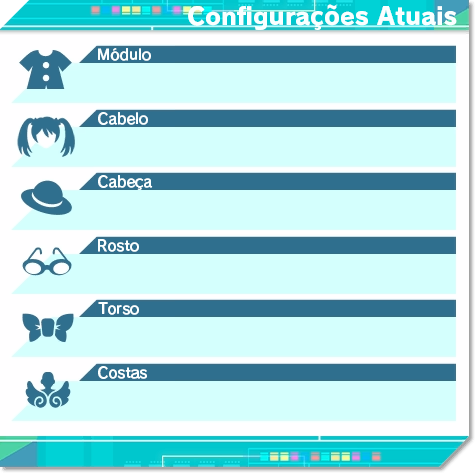
<style>
.page{position:relative;width:476px;height:474px;background:#d4fffd}
.page>*{position:absolute;margin:0}
.t1{font:24px "RodinPro-EB";letter-spacing:-0.001em;color:#faffff}
.t2{font:14.7px "RodinPro-DB";color:#faffff}
</style>
<div class="page">
<p class="t1" style="left:188px;top:4px;width:269px;height:26px">Configurações Atuais</p>
<p class="t2" style="left:98px;top:48px;width:53px;height:13px">Módulo</p>
<p class="t2" style="left:98px;top:112px;width:50px;height:13px">Cabelo</p>
<p class="t2" style="left:98px;top:175px;width:55px;height:15px">Cabeça</p>
<p class="t2" style="left:98px;top:239px;width:41px;height:13px">Rosto</p>
<p class="t2" style="left:98px;top:302px;width:41px;height:13px">Torso</p>
<p class="t2" style="left:98px;top:366px;width:49px;height:13px">Costas</p>
</div>
